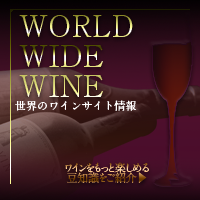
<style>
.page{position:relative;width:200px;height:200px}
.page>*{position:absolute;margin:0}
.t1{font:30px/30px "Shuuei3Std-Light";letter-spacing:0.005em}
.t2{font:11px "A1MinchoStd-Bold";letter-spacing:0.005em;color:#ffffff}
.t3{font:11px/10px "A1MinchoStd-Bold";letter-spacing:-0.025em}
.t4{font:11px/10px "KozGoPr6N-Regular";letter-spacing:-0.025em}
</style>
<div class="page">
<p class="t1" style="left:19px;top:15px;width:114px;height:82px;text-align:justify">WORLD<br>WIDE<br>WINE</p>
<p class="t2" style="left:15px;top:100px;width:122px;height:11px">世界のワインサイト情報</p>
<p class="t3" style="left:65px;top:162px;width:84px;height:21px;text-align:center">ワインをもっと楽しめる<br>豆知識をご紹介<span class="t4">▶</span></p>
</div>
